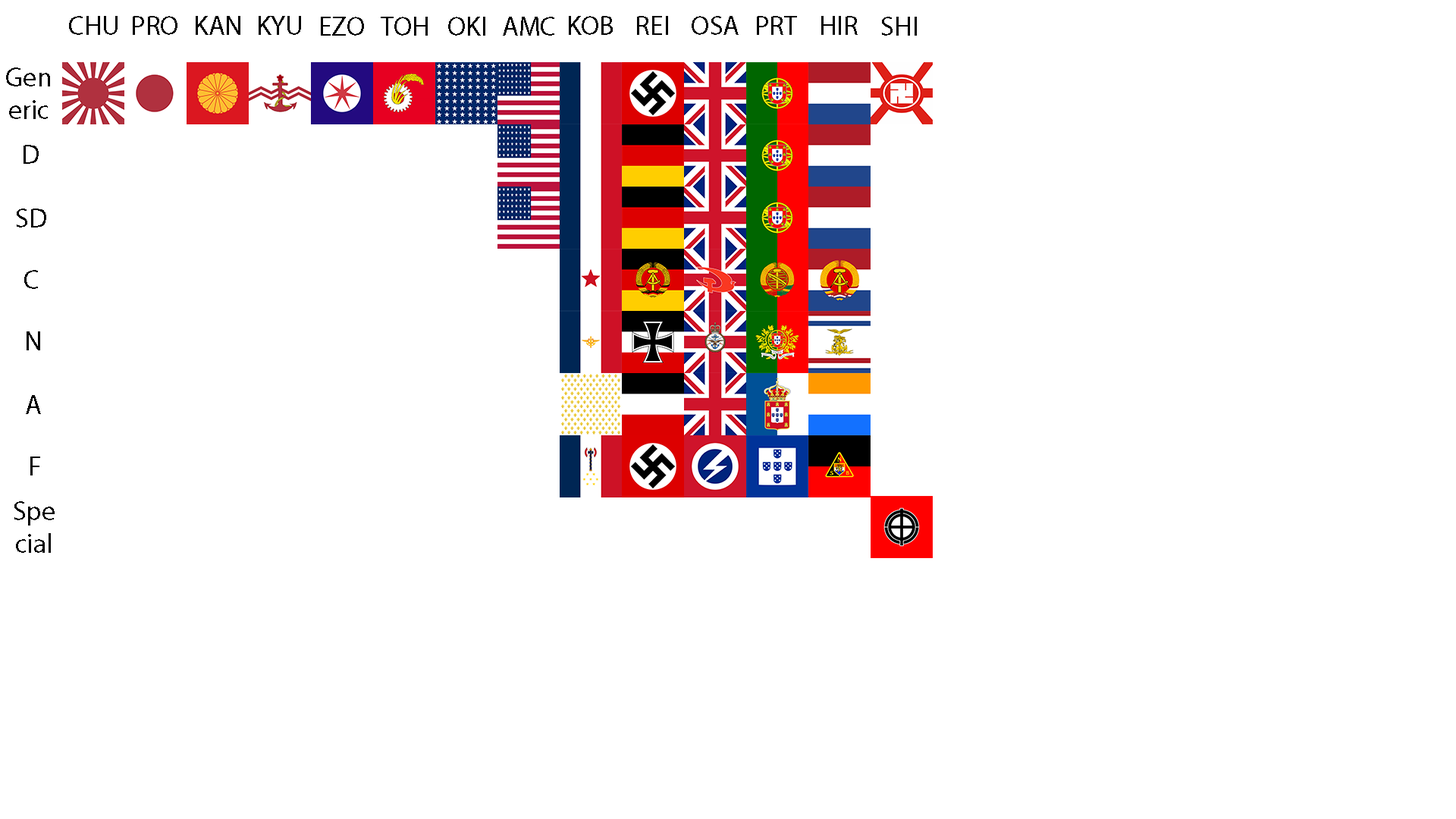
<style>
.page{position:relative;width:1456px;height:819px;background:#ffffff}
.page>*{position:absolute;margin:0}
.t1{font:27.3px "MyriadPro-Regular";color:#000000}
</style>
<div class="page">
<p class="t1" style="left:69px;top:16px;width:49px;height:19px">CHU</p>
<p class="t1" style="left:133px;top:16px;width:44px;height:19px">PRO</p>
<p class="t1" style="left:196px;top:16px;width:44px;height:19px">KAN</p>
<p class="t1" style="left:259px;top:16px;width:42px;height:19px">KYU</p>
<p class="t1" style="left:321px;top:17px;width:43px;height:19px">EZO</p>
<p class="t1" style="left:381px;top:17px;width:47px;height:19px">TOH</p>
<p class="t1" style="left:448px;top:17px;width:37px;height:19px">OKI</p>
<p class="t1" style="left:503px;top:17px;width:51px;height:19px">AMC</p>
<p class="t1" style="left:569px;top:16px;width:44px;height:19px">KOB</p>
<p class="t1" style="left:637px;top:16px;width:31px;height:19px">REI</p>
<p class="t1" style="left:692px;top:16px;width:47px;height:19px">OSA</p>
<p class="t1" style="left:757px;top:16px;width:40px;height:19px">PRT</p>
<p class="t1" style="left:821px;top:16px;width:37px;height:19px">HIR</p>
<p class="t1" style="left:882px;top:17px;width:35px;height:19px">SHI</p>
<p class="t1" style="left:6px;top:67px;width:44px;height:52px;text-align:center">Gen<br>eric</p>
<p class="t1" style="left:24px;top:145px;width:15px;height:19px">D</p>
<p class="t1" style="left:17px;top:209px;width:29px;height:18px">SD</p>
<p class="t1" style="left:24px;top:270px;width:14px;height:19px">C</p>
<p class="t1" style="left:27px;top:331px;width:13px;height:19px">N</p>
<p class="t1" style="left:26px;top:395px;width:15px;height:19px">A</p>
<p class="t1" style="left:30px;top:457px;width:10px;height:18px">F</p>
<p class="t1" style="left:14px;top:501px;width:41px;height:52px;text-align:center">Spe<br>cial</p>
</div>
